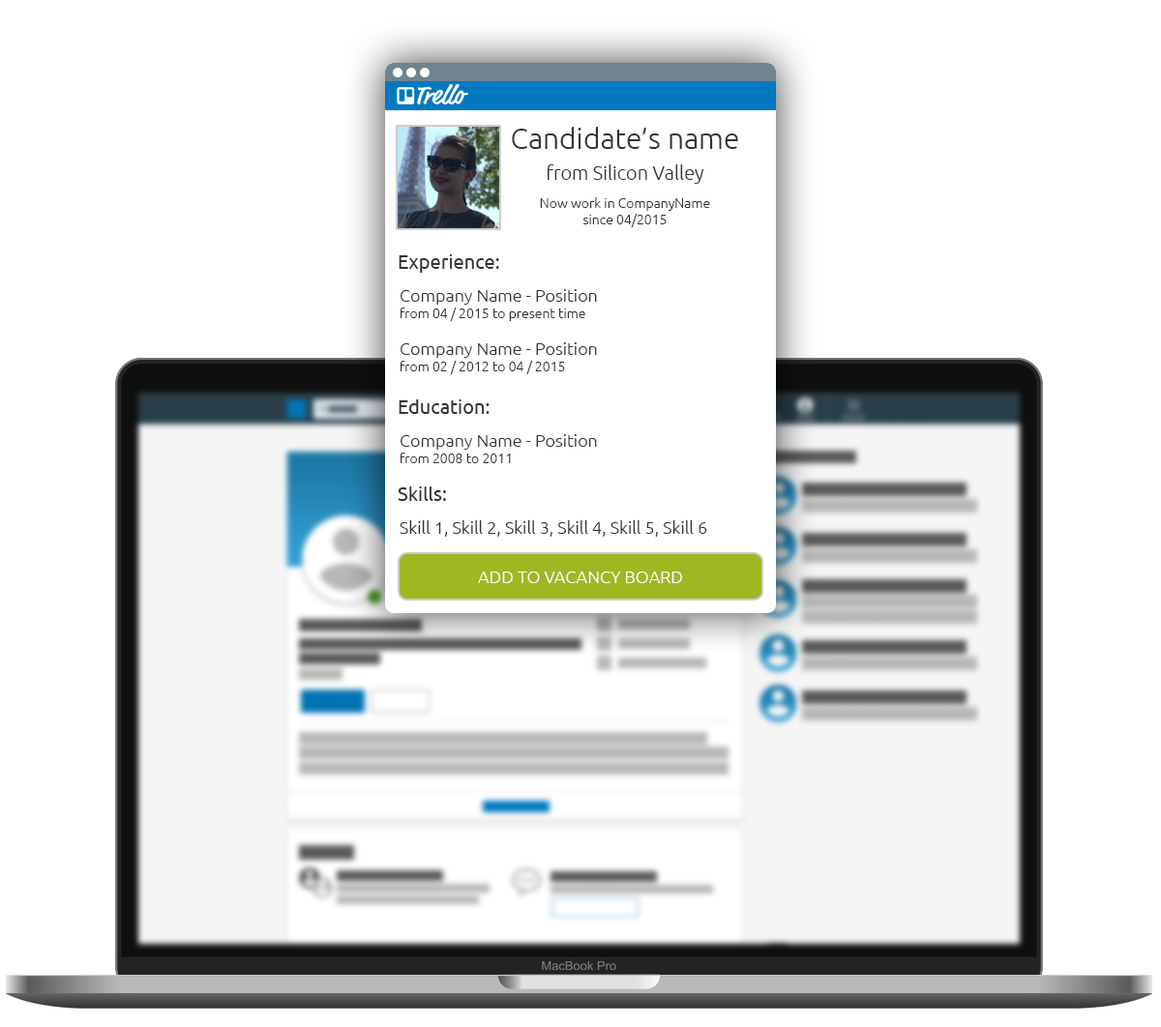
<style>
.page{position:relative;width:1161px;height:1027px;background:#ffffff}
.page>*{position:absolute;margin:0}
.t1{font:29px "Ubuntu-Light";color:#333333}
.t2{font:19.3px "Ubuntu-Light";color:#333333}
.t3{font:13.5px "Ubuntu-Light";color:#333333}
.t4{font:19.3px "Ubuntu";color:#333333}
.t5{font:17.4px "Ubuntu-Light";color:#333333}
.t6{font:17.4px "Ubuntu-Light";color:#ffffff}
</style>
<div class="page">
<p class="t1" style="left:512px;top:127px;width:226px;height:22px">Candidate’s name</p>
<p class="t2" style="left:547px;top:164px;width:157px;height:20px">from Silicon Valley</p>
<p class="t3" style="left:540px;top:197px;width:170px;height:30px;text-align:center">Now work in CompanyName<br>since 04/2015</p>
<p class="t4" style="left:399px;top:254px;width:100px;height:19px">Experience:</p>
<p class="t3" style="left:400px;top:289px;width:197px;height:85px"><span class="t5">Company Name - Position<br></span>from 04 / 2015 to present time<br><br><span class="t5">Company Name - Position<br></span>from 02 / 2012 to 04 / 2015</p>
<p class="t4" style="left:399px;top:399px;width:90px;height:15px">Education:</p>
<p class="t5" style="left:400px;top:434px;width:197px;height:29px">Company Name - Position<br><span class="t3">from 2008 to 2011</span></p>
<p class="t4" style="left:398px;top:487px;width:48px;height:14px">Skills:</p>
<p class="t5" style="left:399px;top:520px;width:308px;height:17px">Skill 1, Skill 2, Skill 3, Skill 4, Skill 5, Skill 6</p>
<p class="t6" style="left:478px;top:572px;width:204px;height:11px">ADD TO VACANCY BOARD</p>
</div>
